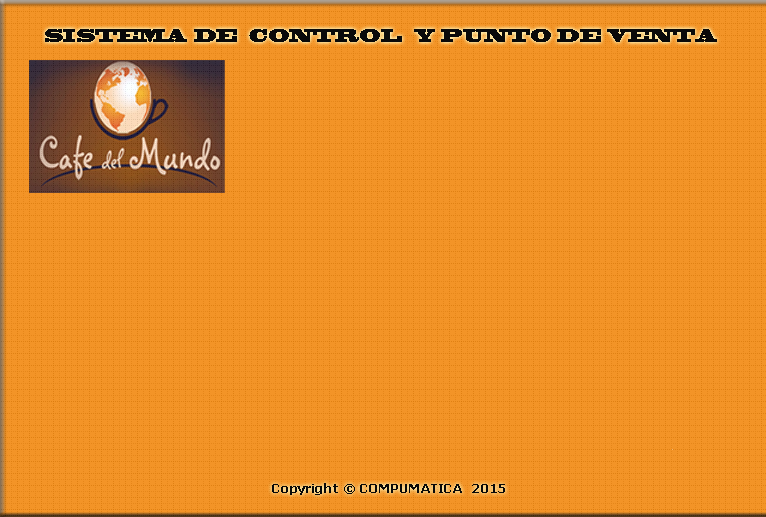
<style>
.page{position:relative;width:766px;height:517px;background:#f39427}
.page>*{position:absolute;margin:0}
.t1{font:17.4px "BlackoakStd";color:#0a0a0a;scale:0.69 1}
.t2{font:12px "Tahoma-Bold";color:#090909;scale:1.1 1}
</style>
<div class="page">
<p class="t1" style="left:45px;top:29px;width:672px;height:13px">SISTEMA DE  CONTROL  Y PUNTO DE VENTA</p>
<p class="t2" style="left:272px;top:483px;width:233px;height:12px">Copyright © COMPUMATICA  2015</p>
</div>
